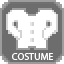
<style>
.page{position:relative;width:64px;height:64px;background:#ffffff}
.page>*{position:absolute;margin:0}
.t1{font:10px "MyriadPro-Regular";color:#ffffff}
</style>
<div class="page">
<p class="t1" style="left:12px;top:53px;width:41px;height:7px">COSTUME</p>
</div>
